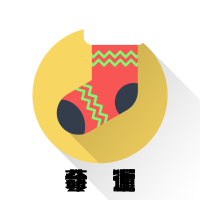
<style>
.page{position:relative;width:200px;height:200px;background:#ffffff}
.page>*{position:absolute;margin:0}
.t1{font:25.4px "CP-Font";letter-spacing:1em;color:#000000;scale:0.95 1}
</style>
<div class="page">
<p class="t1" style="left:65px;top:169px;width:70px;height:23px">命運</p>
<p class="t1" style="left:65px;top:169px;width:70px;height:23px">藝術</p>
</div>
